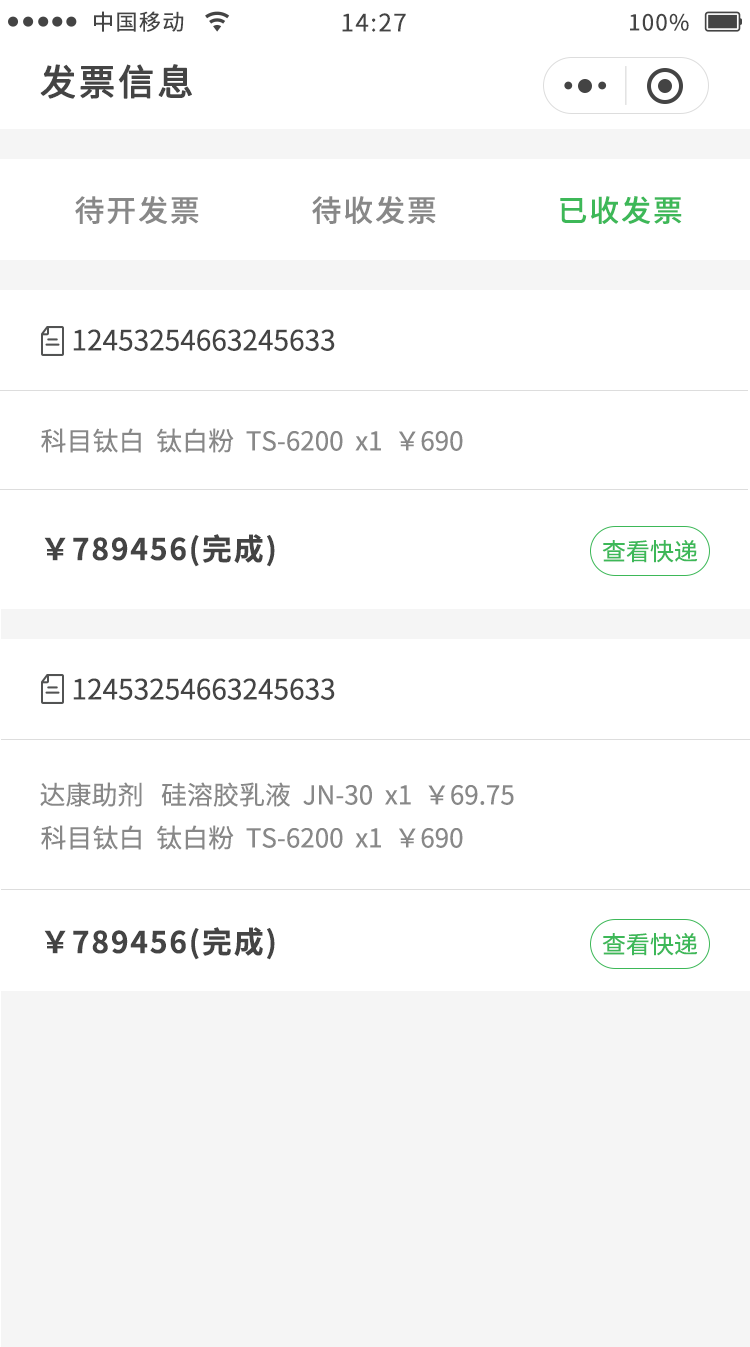
<style>
.page{position:relative;width:750px;height:1347px;background:#ffffff}
.page>*{position:absolute;margin:0}
.t1{font:22px "NotoSansCJKsc-Regular";letter-spacing:0.06em;color:#444444}
.t2{font:24px "NotoSansCJKsc-Regular";letter-spacing:0.06em;color:#444444}
.t3{font:36px "NotoSansCJKsc-Regular";letter-spacing:0.06em;color:#444444;font-weight:bold}
.t4{font:30px "NotoSansCJKsc-Medium";letter-spacing:0.06em;color:#888888}
.t5{font:30px "NotoSansCJKsc-Medium";letter-spacing:0.06em;color:#3db858}
.t6{font:28px "NotoSansCJKsc-Regular";color:#444444}
.t7{font:26px "NotoSansCJKsc-Regular";color:#888888}
.t8{font:30px "NotoSansCJKsc-Bold";letter-spacing:0.06em;color:#444444}
.t9{font:24px "NotoSansCJKsc-Regular";color:#3db858}
</style>
<div class="page">
<p class="t1" style="left:94px;top:11px;width:90px;height:21px">中国移动</p>
<p class="t2" style="left:342px;top:13px;width:64px;height:19px">14:27</p>
<p class="t1" style="left:630px;top:13px;width:59px;height:18px">100%</p>
<p class="t3" style="left:40px;top:64px;width:152px;height:35px">发票信息</p>
<p class="t4" style="left:75px;top:196px;width:124px;height:28px">待开发票</p>
<p class="t4" style="left:312px;top:196px;width:124px;height:28px">待收发票</p>
<p class="t5" style="left:560px;top:196px;width:122px;height:28px">已收发票</p>
<p class="t6" style="left:73px;top:329px;width:262px;height:22px">12453254663245633</p>
<p class="t7" style="left:41px;top:428px;width:422px;height:25px">科目钛白  钛白粉  TS-6200  x1  ￥690</p>
<p class="t8" style="left:44px;top:534px;width:231px;height:33px">￥789456(完成)</p>
<p class="t9" style="left:602px;top:540px;width:96px;height:23px">查看快递</p>
<p class="t6" style="left:73px;top:678px;width:262px;height:22px">12453254663245633</p>
<p class="t7" style="left:40px;top:782px;width:474px;height:25px">达康助剂   硅溶胶乳液  JN-30  x1  ￥69.75</p>
<p class="t7" style="left:41px;top:825px;width:422px;height:25px">科目钛白  钛白粉  TS-6200  x1  ￥690</p>
<p class="t8" style="left:44px;top:927px;width:231px;height:33px">￥789456(完成)</p>
<p class="t9" style="left:602px;top:933px;width:96px;height:23px">查看快递</p>
</div>
